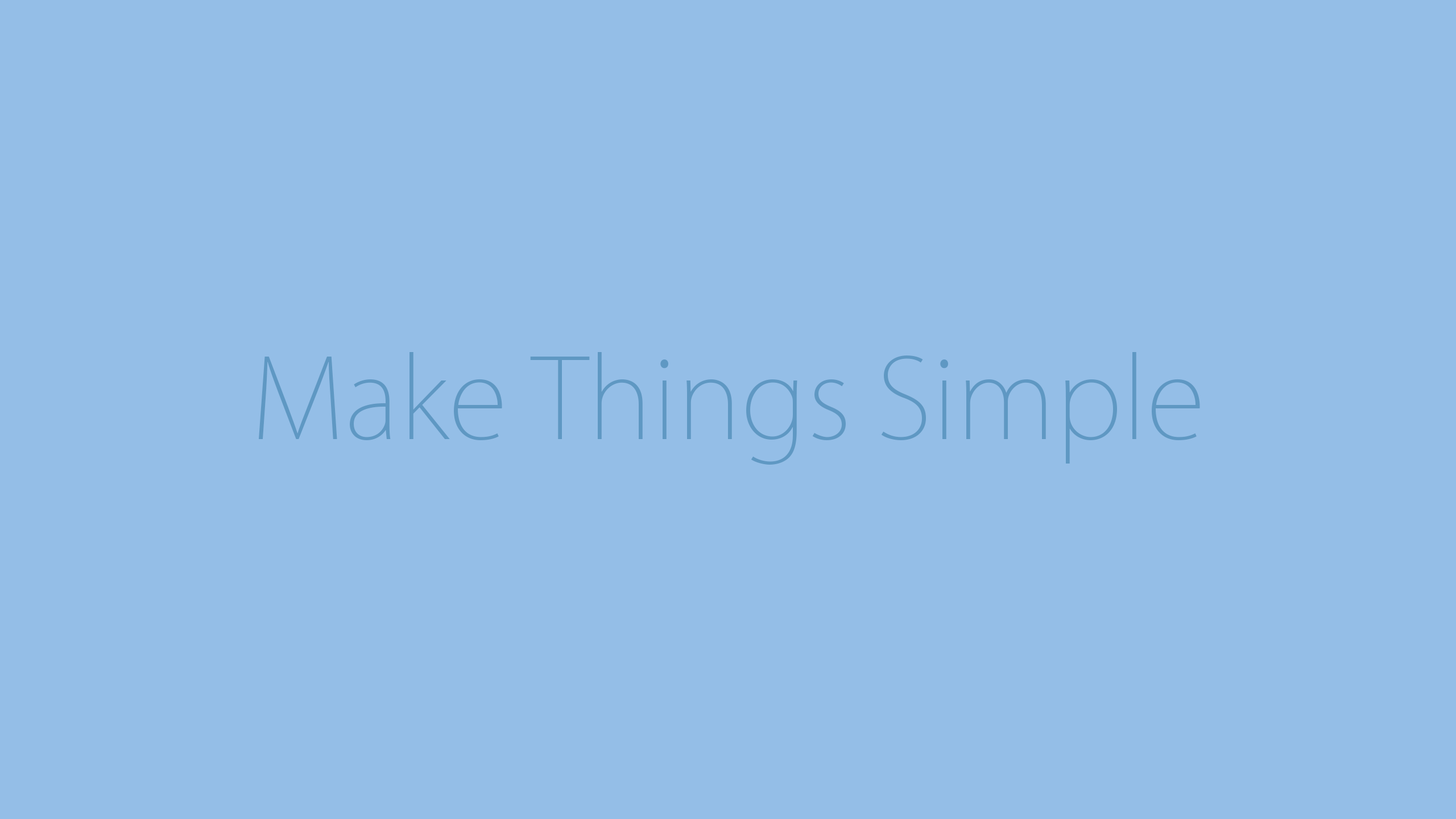
<style>
.page{position:relative;width:1456px;height:819px;background:#94bee7}
.page>*{position:absolute;margin:0}
.t1{font:109.2px "KozGoPr6N-ExtraLight";color:#5f98c3}
</style>
<div class="page">
<p class="t1" style="left:259px;top:352px;width:941px;height:113px">Make Things Simple</p>
</div>
